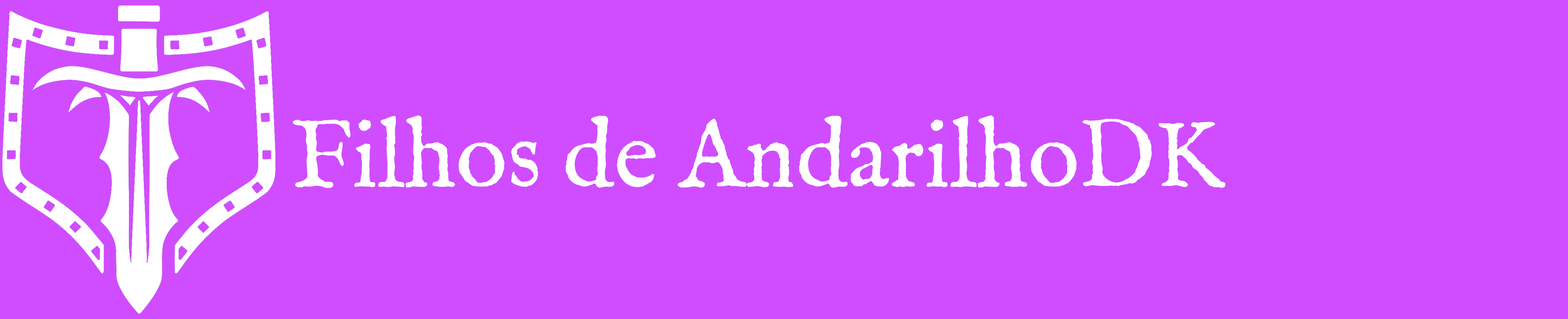
<style>
.page{position:relative;width:1568px;height:319px;background:#cf4dff}
.page>*{position:absolute;margin:0}
.t1{font:96.6px "IM_FELL_English_Roman";color:#ffffff}
</style>
<div class="page">
<p class="t1" style="left:293px;top:115px;width:932px;height:73px">Filhos de AndarilhoDK</p>
</div>
